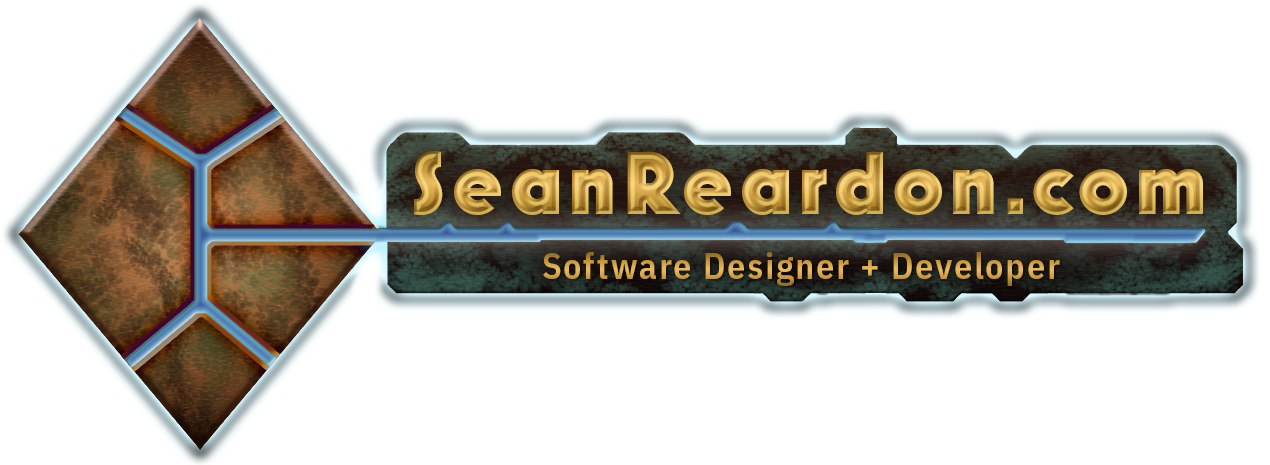
<style>
.page{position:relative;width:1270px;height:465px;background:#ffffff}
.page>*{position:absolute;margin:0}
.t1{font:90.1px "MostraNuova-Heavy";letter-spacing:0.08em}
.t2{font:36px "IBMPlexSansCond-SemiBold";letter-spacing:0.05em;color:#d1a144}
</style>
<div class="page">
<p class="t1" style="left:414px;top:151px;width:789px;height:64px">SeanReardon.com</p>
<p class="t2" style="left:543px;top:252px;width:517px;height:34px">Software Designer + Developer</p>
</div>
